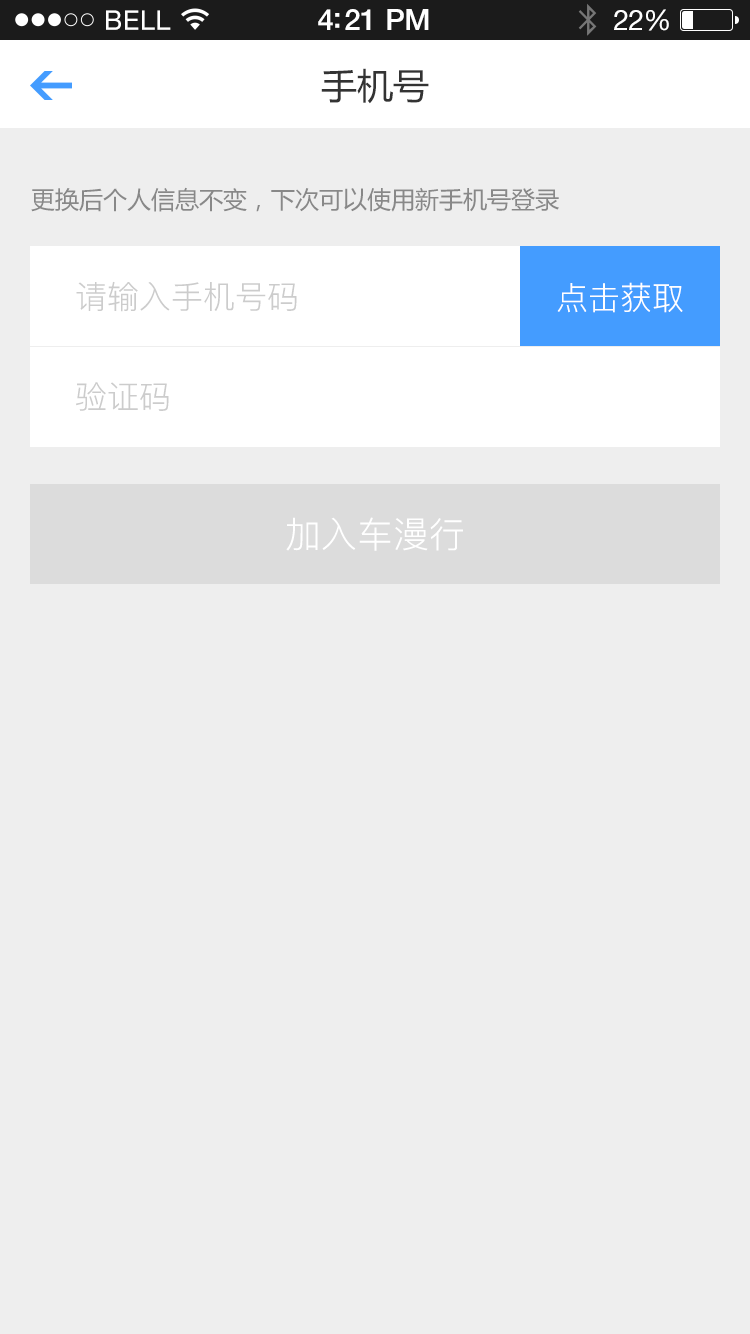
<style>
.page{position:relative;width:750px;height:1334px;background:#eeeeee}
.page>*{position:absolute;margin:0}
.t1{font:36px "MicrosoftYaHei";color:#333333}
.t2{font:24px "MicrosoftYaHei";color:#888888}
.t3{font:32px "PingFang-SC-Regular";color:#cccccc}
.t4{font:32px "PingFang-SC-Regular";color:#ffffff}
.t5{font:36px "PingFang-SC-Regular";color:#ffffff}
</style>
<div class="page">
<p class="t1" style="left:321px;top:68px;width:108px;height:36px">手机号</p>
<p class="t2" style="left:31px;top:187px;width:528px;height:25px">更换后个人信息不变，下次可以使用新手机号登录</p>
<p class="t3" style="left:76px;top:281px;width:221px;height:31px">请输入手机号码</p>
<p class="t4" style="left:557px;top:282px;width:126px;height:31px">点击获取</p>
<p class="t3" style="left:76px;top:382px;width:93px;height:29px">验证码</p>
<p class="t5" style="left:286px;top:517px;width:177px;height:34px">加入车漫行</p>
</div>
